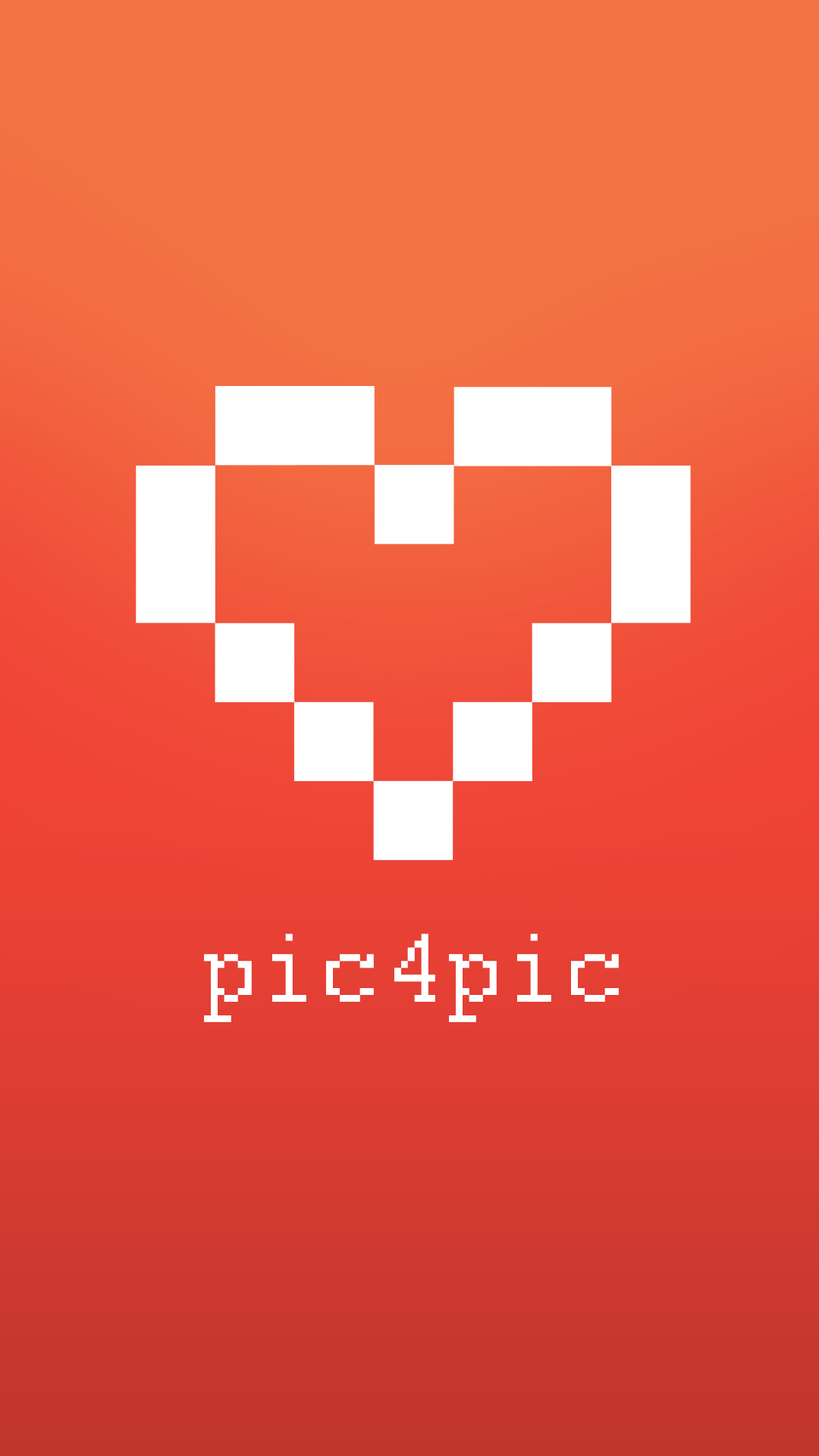
<style>
.page{position:relative;width:819px;height:1456px}
.page>*{position:absolute;margin:0}
.t1{font:108.6px "Courier";color:#ffffff}
</style>
<div class="page">
<p class="t1" style="left:204px;top:933px;width:415px;height:89px">pic4pic</p>
</div>
